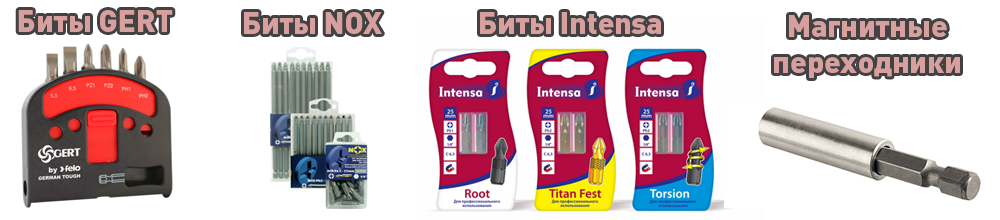
<style>
.page{position:relative;width:1000px;height:220px;background:#ffffff}
.page>*{position:absolute;margin:0}
.t1{font:30px "DINPro-Black";color:#d89f9f}
</style>
<div class="page">
<p class="t1" style="left:18px;top:10px;width:155px;height:22px">Биты GERT</p>
<p class="t1" style="left:244px;top:12px;width:138px;height:22px">Биты NOX</p>
<p class="t1" style="left:480px;top:12px;width:181px;height:22px">Биты Intensa</p>
</div>
